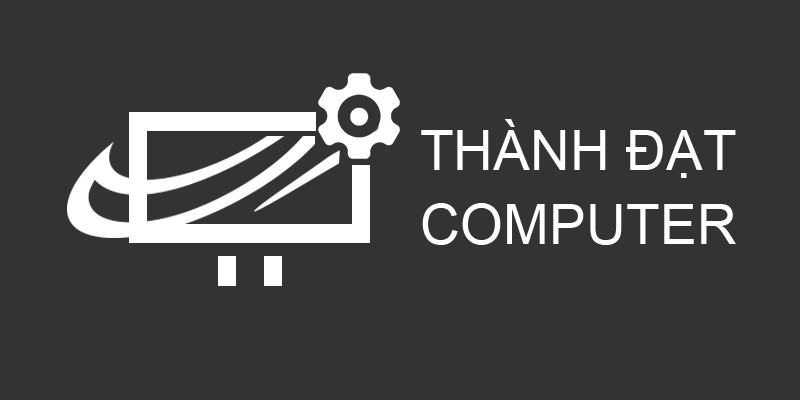
<style>
.page{position:relative;width:800px;height:400px;background:#333333}
.page>*{position:absolute;margin:0}
.t1{font:55.4px/73.9px "ArialMT";color:#ffffff}
</style>
<div class="page">
<p class="t1" style="left:421px;top:119px;width:315px;height:126px">THÀNH ĐẠT<br>COMPUTER</p>
</div>
